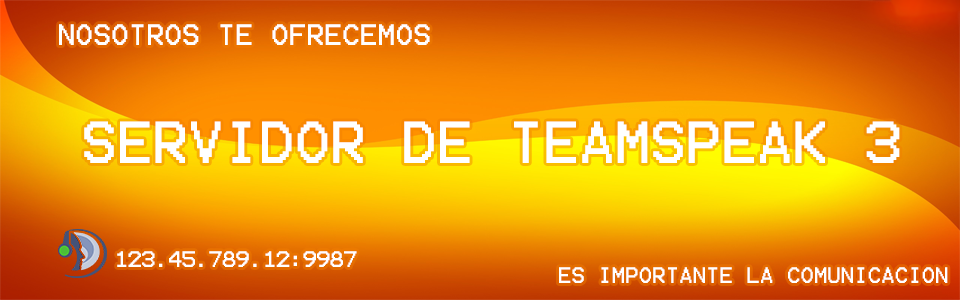
<style>
.page{position:relative;width:960px;height:300px}
.page>*{position:absolute;margin:0}
.t1{font:23.7px "Terminal";color:#ffffff;text-transform:uppercase}
.t2{font:47.4px "Terminal";color:#ffffff;text-transform:uppercase}
.t3{font:18px "Terminal";color:#ffffff;text-transform:uppercase}
</style>
<div class="page">
<p class="t1" style="left:59px;top:24px;width:371px;height:21px">Nosotros te ofrecemos</p>
<p class="t2" style="left:84px;top:121px;width:816px;height:42px">Servidor de teamspeak 3</p>
<p class="t3" style="left:117px;top:251px;width:240px;height:16px">123.45.789.12:9987</p>
<p class="t3" style="left:559px;top:267px;width:389px;height:16px">Es importante la comunicacion</p>
</div>
